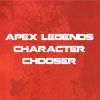
<style>
.page{position:relative;width:100px;height:100px}
.page>*{position:absolute;margin:0}
.t1{font:8.4px/11.9px "Coalition";color:#ffffff}
</style>
<div class="page">
<p class="t1" style="left:5px;top:33px;width:89px;height:32px;text-align:center">Apex legends<br>character<br>chooser</p>
</div>
